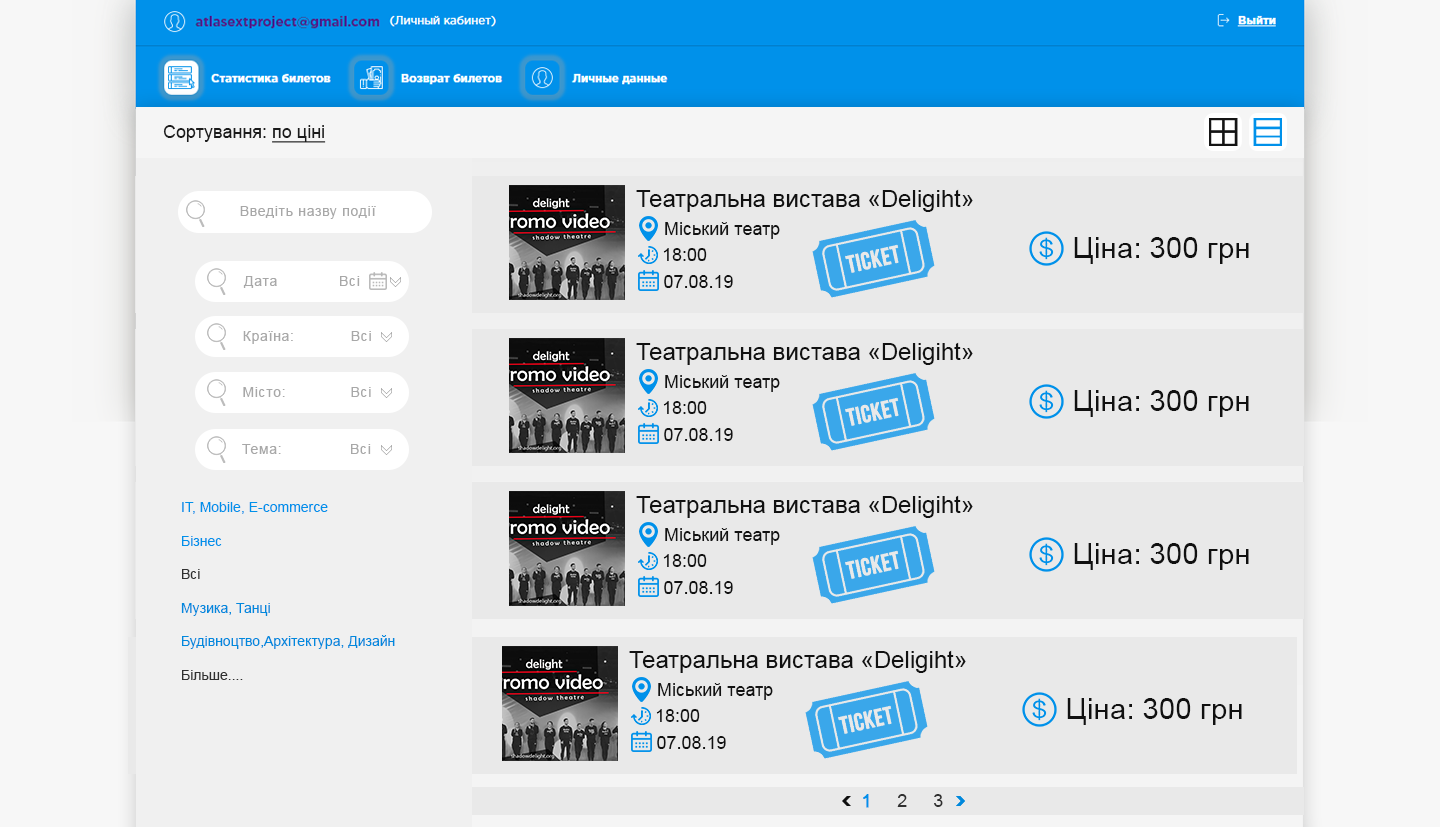
<style>
.page{position:relative;width:1440px;height:827px;background:#e9e9e9}
.page>*{position:absolute;margin:0}
.t1{font:18px "ArialMT";color:#1b1b1b}
.t2{font:18px "ArialMT";color:#1b1b1b;text-decoration:underline}
.t3{font:24px "ArialMT";color:#111111}
.t4{font:14px "ArialMT";letter-spacing:0.05em;color:#a8a8a8}
.t5{font:18px "ArialMT";color:#121212}
.t6{font:29.1px "ArialMT";color:#111111}
.t7{font:14px "ArialMT";color:#0189dd}
.t8{font:14px "ArialMT";color:#0091ea}
.t9{font:14px "ArialMT";color:#303030}
.t10{font:18px "ArialMT";color:#303030}
.t11{font:18px "ArialMT";color:#0091ea;font-weight:bold}
</style>
<div class="page">
<p class="t1" style="left:163px;top:125px;width:163px;height:18px">Сортування: <span class="t2">по ціні</span></p>
<p class="t3" style="left:636px;top:189px;width:337px;height:23px">Театральна вистава «Deligiht»</p>
<p class="t4" style="left:240px;top:206px;width:136px;height:13px">Введіть назву події</p>
<p class="t5" style="left:665px;top:222px;width:115px;height:17px">Міський театр</p>
<p class="t6" style="left:1074px;top:237px;width:175px;height:27px">Ціна: 300 грн</p>
<p class="t5" style="left:663px;top:248px;width:44px;height:13px">18:00</p>
<p class="t4" style="left:243px;top:276px;width:117px;height:12px">Дата       Всі</p>
<p class="t5" style="left:664px;top:275px;width:69px;height:13px">07.08.19</p>
<p class="t4" style="left:243px;top:331px;width:128px;height:13px">Країна:  Всі</p>
<p class="t3" style="left:636px;top:342px;width:337px;height:23px">Театральна вистава «Deligiht»</p>
<p class="t5" style="left:665px;top:375px;width:115px;height:17px">Міський театр</p>
<p class="t4" style="left:243px;top:387px;width:128px;height:10px">Місто:   Всі</p>
<p class="t6" style="left:1074px;top:390px;width:175px;height:27px">Ціна: 300 грн</p>
<p class="t5" style="left:663px;top:401px;width:44px;height:13px">18:00</p>
<p class="t5" style="left:664px;top:428px;width:69px;height:13px">07.08.19</p>
<p class="t4" style="left:242px;top:444px;width:129px;height:10px">Тема:   Всі</p>
<p class="t3" style="left:636px;top:495px;width:337px;height:23px">Театральна вистава «Deligiht»</p>
<p class="t7" style="left:181px;top:502px;width:214px;height:178px"><span class="t8">IT, Mobile, E-commerce<br><br>Бізнес<br></span><span class="t9"><br>Всі<br><br></span>Музика, Танці<br><br>Будівноцтво,Архітектура, Дизайн<br><span class="t9"><br>Більше....</span></p>
<p class="t5" style="left:665px;top:528px;width:115px;height:17px">Міський театр</p>
<p class="t6" style="left:1074px;top:543px;width:175px;height:27px">Ціна: 300 грн</p>
<p class="t5" style="left:663px;top:554px;width:44px;height:13px">18:00</p>
<p class="t5" style="left:664px;top:581px;width:69px;height:13px">07.08.19</p>
<p class="t3" style="left:629px;top:650px;width:337px;height:23px">Театральна вистава «Deligiht»</p>
<p class="t5" style="left:658px;top:683px;width:115px;height:17px">Міський театр</p>
<p class="t6" style="left:1067px;top:698px;width:175px;height:27px">Ціна: 300 грн</p>
<p class="t5" style="left:656px;top:709px;width:44px;height:13px">18:00</p>
<p class="t5" style="left:657px;top:736px;width:69px;height:13px">07.08.19</p>
<p class="t10" style="left:863px;top:794px;width:80px;height:14px"><span class="t11">1</span>  2  3</p>
</div>
